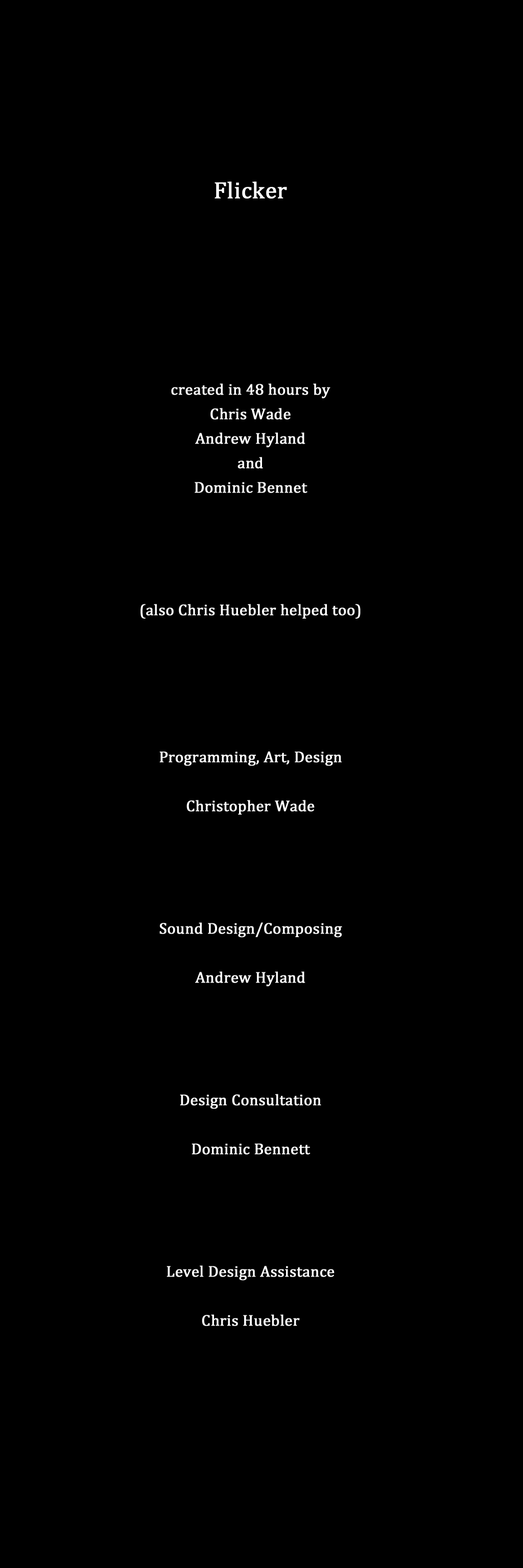
<style>
.page{position:relative;width:523px;height:1568px;background:#000000}
.page>*{position:absolute;margin:0}
.t1{font:15.7px/24.5px "Cambria";color:#ffffff;font-weight:bold}
.t2{font:23.5px/0px "Cambria";color:#ffffff;font-weight:bold}
</style>
<div class="page">
<p class="t1" style="left:140px;top:181px;width:220px;height:1145px;text-align:center"><span class="t2">Flicker<br><br><br><br><br><br><br><br><br><br><br><br><br></span><br><br><br><br><br><br><br>created in 48 hours by<br>Chris Wade<br>Andrew Hyland<br>and<br>Dominic Bennet<br><br><br><br><br>(also Chris Huebler helped too)<br><br><br><br><br><br>Programming, Art, Design<br><br>Christopher Wade<br><br><br><br><br>Sound Design/Composing<br><br>Andrew Hyland<br><br><br><br><br>Design Consultation<br><br>Dominic Bennett<br><br><br><br><br>Level Design Assistance<br><br>Chris Huebler</p>
</div>
